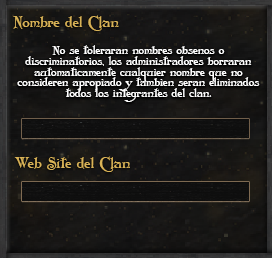
<style>
.page{position:relative;width:272px;height:258px}
.page>*{position:absolute;margin:0}
.t1{font:14.9px "Folkard";color:#d9b357}
.t2{font:11.4px/10.7px "Folkard";color:#ffffff}
</style>
<div class="page">
<p class="t1" style="left:13px;top:15px;width:106px;height:16px">Nombre del Clan</p>
<p class="t2" style="left:17px;top:45px;width:243px;height:57px;text-align:center">No se toleraran nombres obsenos o<br>discriminatorios, los administradores borraran<br>automaticamente cualquier nombre que no<br>consideren apropiado y tambien seran eliminados<br>todos los integrantes del clan.</p>
<p class="t1" style="left:14px;top:156px;width:116px;height:16px">Web Site del Clan</p>
</div>
